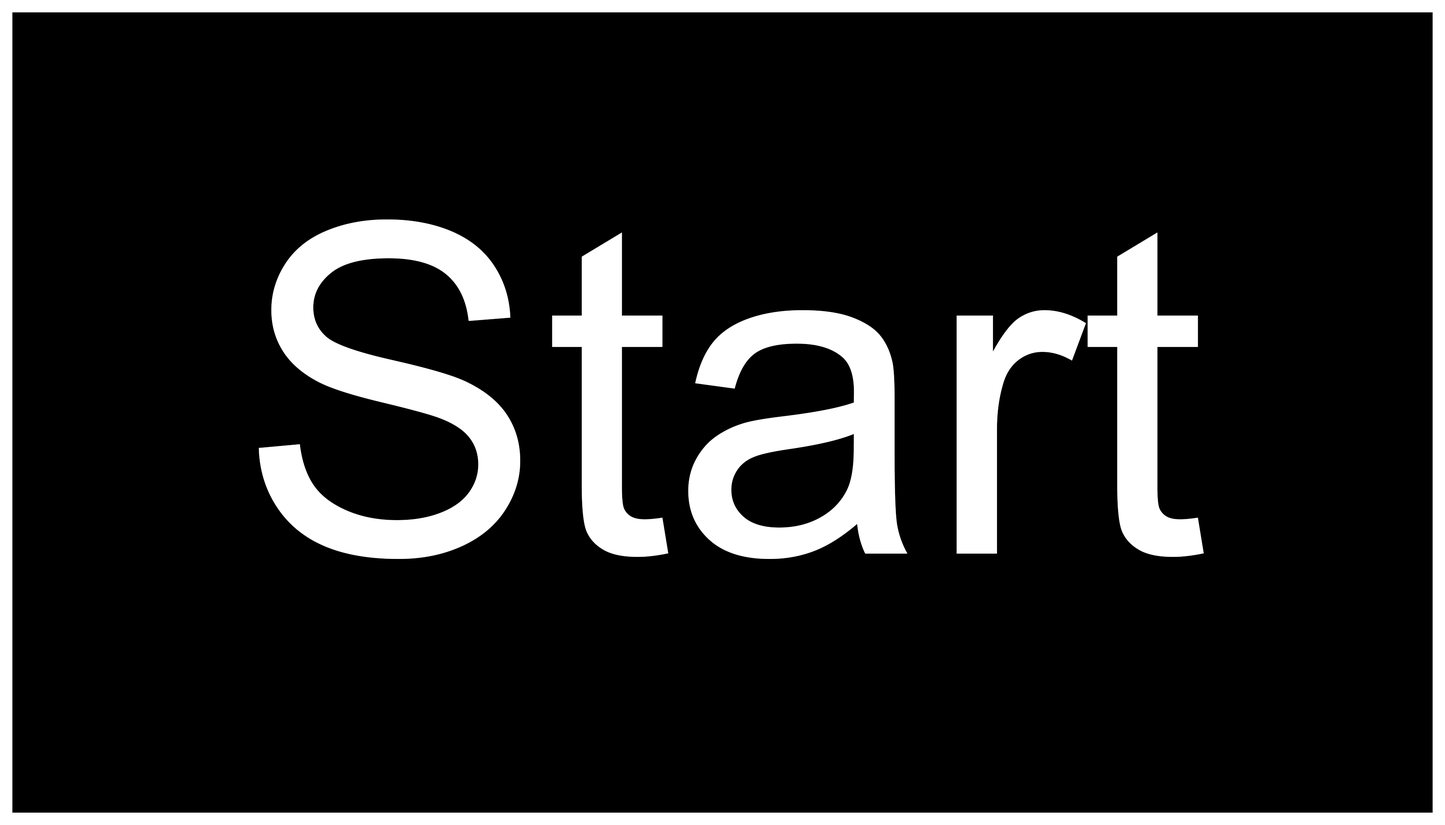
<style>
.page{position:relative;width:1445px;height:825px;background:#000000}
.page>*{position:absolute;margin:0}
.t1{font:458.6px "ArialMT";color:#ffffff}
</style>
<div class="page">
<p class="t1" style="left:258px;top:220px;width:946px;height:339px">Start</p>
</div>
